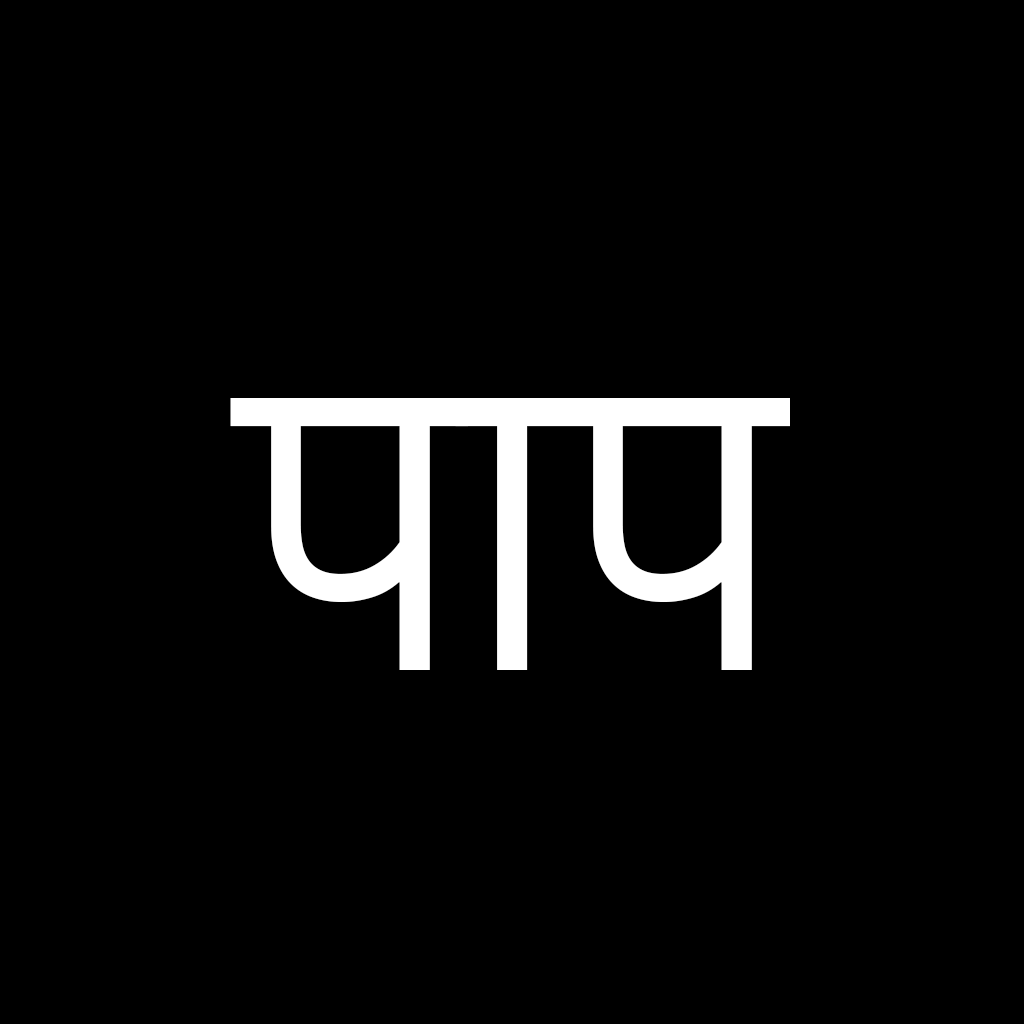
<style>
.page{position:relative;width:1024px;height:1024px;background:#000000}
.page>*{position:absolute;margin:0}
.t1{font:372.8px "NirmalaUI";color:#ffffff}
</style>
<div class="page">
<p class="t1" style="left:230px;top:398px;width:560px;height:272px">पाप</p>
</div>
